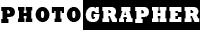
<style>
.page{position:relative;width:200px;height:30px;background:#000000}
.page>*{position:absolute;margin:0}
.t1{font:21.6px "Rockwell-ExtraBold";letter-spacing:0.1em;color:#000000;scale:0.83 1}
.t2{font:21.6px "Rockwell-ExtraBold";letter-spacing:0.1em;color:#ffffff;scale:0.83 1}
</style>
<div class="page">
<p class="t1" style="left:1px;top:7px;width:80px;height:16px">PHOTO</p>
<p class="t2" style="left:85px;top:7px;width:115px;height:16px">GRAPHER</p>
</div>
